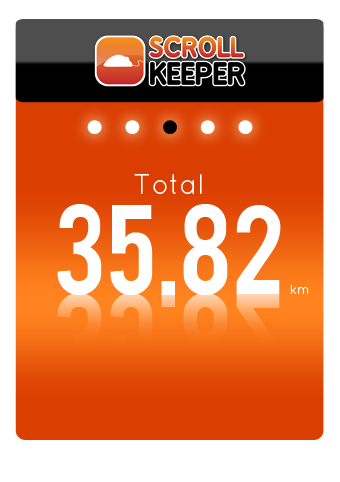
<style>
.page{position:relative;width:340px;height:482px;background:#ffffff}
.page>*{position:absolute;margin:0}
.t1{font:28px "QuicksandBook-Regular";color:#ffffff}
.t2{font:100px "Bebas";color:#ffffff}
.t3{font:100px "Bebas"}
.t4{font:13px "QuicksandBook-Regular";color:#ffffff}
</style>
<div class="page">
<p class="t1" style="left:134px;top:174px;width:68px;height:20px">Total</p>
<p class="t2" style="left:57px;top:204px;width:224px;height:91px">35.82</p>
<p class="t3" style="left:57px;top:293px;width:224px;height:91px">35.82</p>
<p class="t4" style="left:290px;top:285px;width:19px;height:9px">km</p>
</div>
